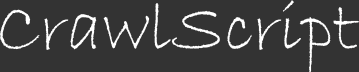
<style>
.page{position:relative;width:359px;height:72px;background:#333333}
.page>*{position:absolute;margin:0}
.t1{font:72px "BradleyHandITC";color:#ffffff}
</style>
<div class="page">
<p class="t1" style="left:0px;top:0px;width:359px;height:72px">CrawlScript</p>
</div>
